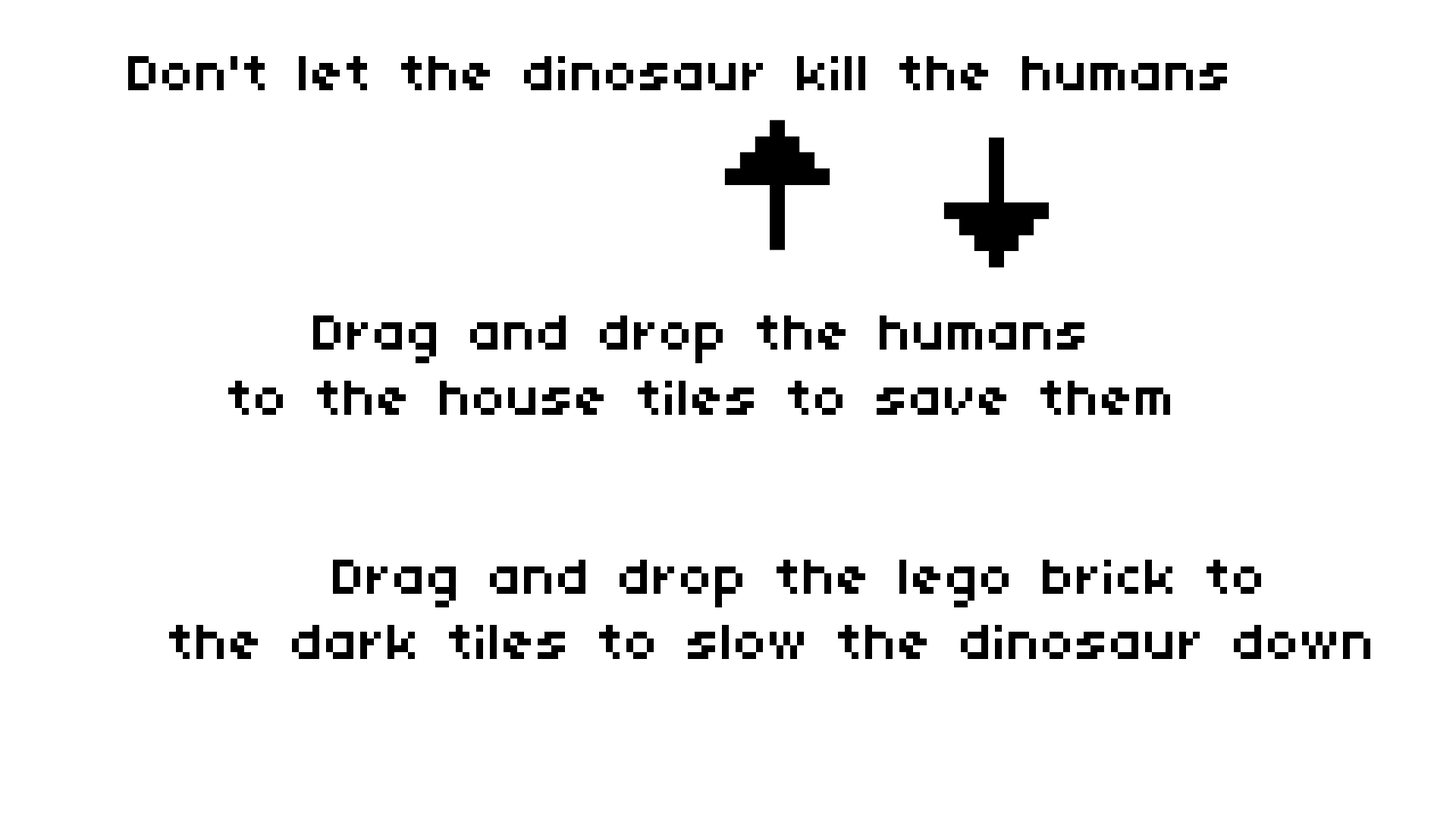
<style>
.page{position:relative;width:1456px;height:819px;background:#ffffff}
.page>*{position:absolute;margin:0}
.t1{font:54.6px "04b03";color:#000000}
</style>
<div class="page">
<p class="t1" style="left:128px;top:56px;width:1099px;height:34px">Don't let the dinosaur kill the humans</p>
<p class="t1" style="left:228px;top:315px;width:942px;height:100px;text-align:center">Drag and drop the humans <br>to the house tiles to save them</p>
<p class="t1" style="left:169px;top:560px;width:1201px;height:99px;text-align:center">Drag and drop the lego brick to <br> the dark tiles to slow the dinosaur down</p>
</div>
